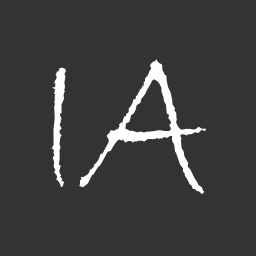
<style>
.page{position:relative;width:256px;height:256px;background:#333333}
.page>*{position:absolute;margin:0}
.t1{font:224px "BradleyHandITC";color:#fefefe;scale:0.82 1}
</style>
<div class="page">
<p class="t1" style="left:51px;top:59px;width:155px;height:136px">IA</p>
</div>
